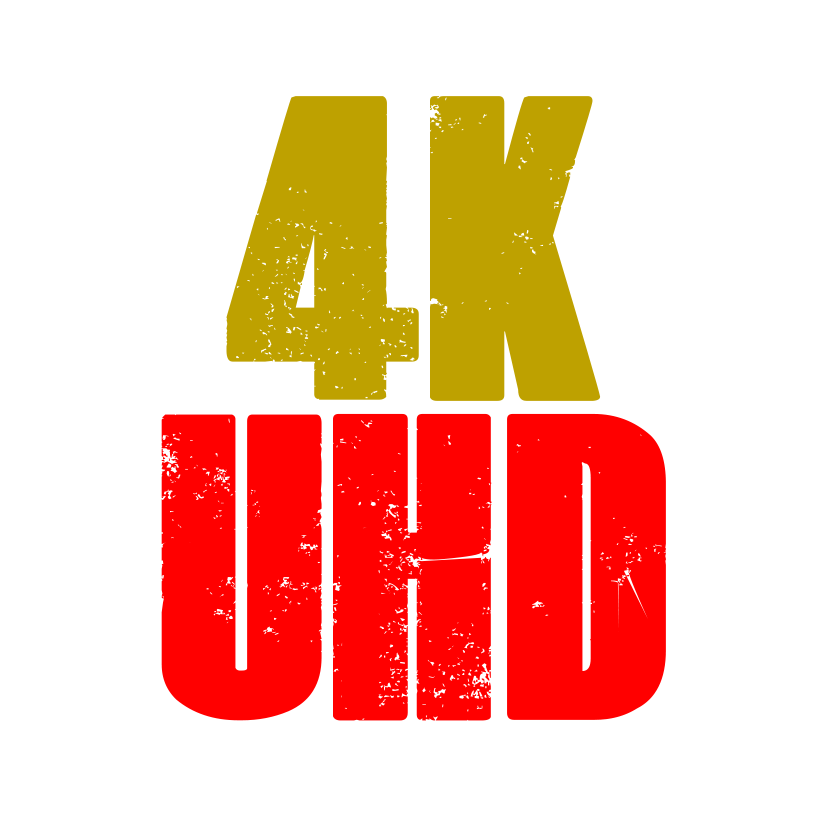
<style>
.page{position:relative;width:827px;height:827px;background:#ffffff}
.page>*{position:absolute;margin:0}
.t1{font:300px "DeadKansas";color:#bea100}
.t2{font:300px "DeadKansas";color:#ff0000}
</style>
<div class="page">
<p class="t1" style="left:226px;top:96px;width:375px;height:305px">4K</p>
<p class="t2" style="left:161px;top:413px;width:505px;height:308px">UHD</p>
</div>
